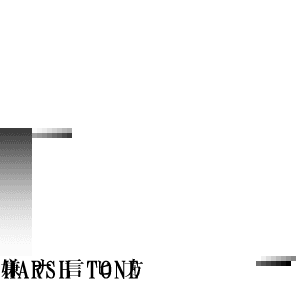
<style>
.page{position:relative;width:296px;height:288px;background:#ffffff}
.page>*{position:absolute;margin:0}
.t1{font:24px "HGMinchoB";letter-spacing:0.075em;color:#000000;text-transform:uppercase}
</style>
<div class="page">
<p class="t1" style="left:4px;top:260px;width:135px;height:19px">Harsh tone</p>
</div>
